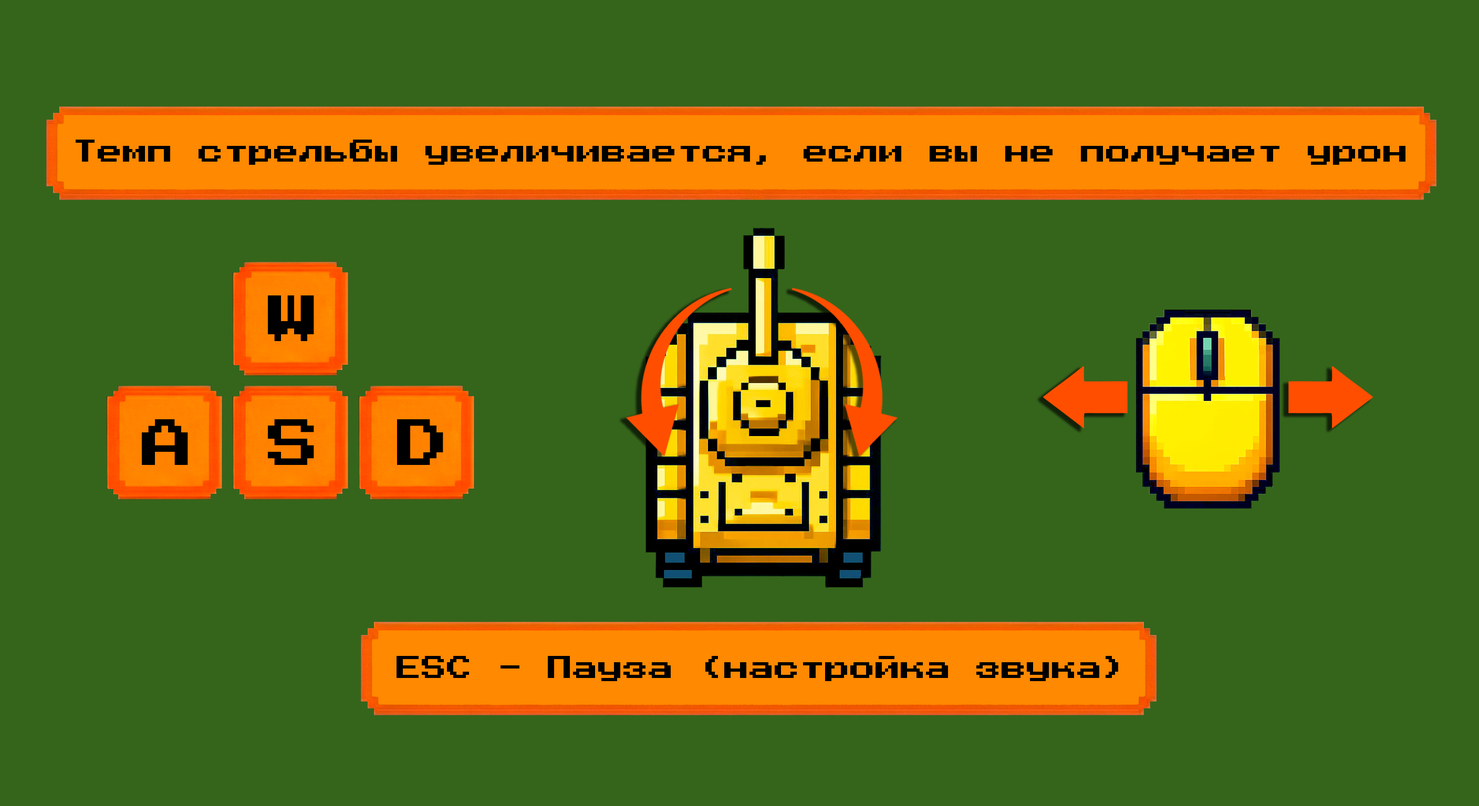
<style>
.page{position:relative;width:1479px;height:806px;background:#35651b}
.page>*{position:absolute;margin:0}
.t1{font:25.2px "PressStart2P-Regular";color:#000000}
.t2{font:52.5px "PressStart2P-Regular";color:#000000}
</style>
<div class="page">
<p class="t1" style="left:76px;top:140px;width:1329px;height:25px">Темп стрельбы увеличивается, если вы не получает урон</p>
<p class="t2" style="left:268px;top:296px;width:46px;height:45px">W</p>
<p class="t2" style="left:142px;top:420px;width:46px;height:45px">A</p>
<p class="t2" style="left:268px;top:420px;width:46px;height:45px">S</p>
<p class="t2" style="left:397px;top:420px;width:46px;height:45px">D</p>
<p class="t1" style="left:396px;top:656px;width:722px;height:26px">ESC - Пауза (настройка звука)</p>
</div>
